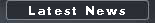
<style>
.page{position:relative;width:155px;height:23px;background:#2b2e35}
.page>*{position:absolute;margin:0}
.t1{font:12px "HeliosBlack";letter-spacing:0.14em;color:#ffffff}
</style>
<div class="page">
<p class="t1" style="left:29px;top:6px;width:96px;height:9px">Latest News</p>
</div>
